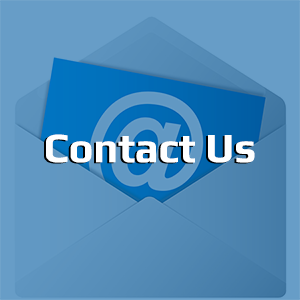
<style>
.page{position:relative;width:300px;height:300px;background:#679dc7}
.page>*{position:absolute;margin:0}
.t1{font:41.7px "Play-Bold";color:#ffffff}
</style>
<div class="page">
<p class="t1" style="left:46px;top:134px;width:209px;height:29px">Contact Us</p>
</div>
